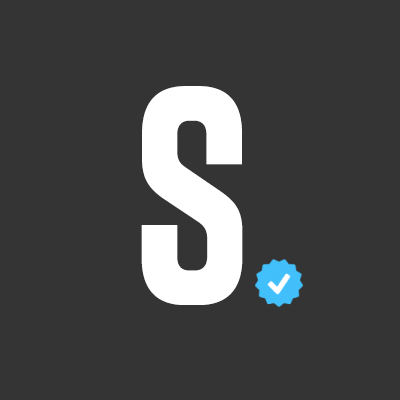
<style>
.page{position:relative;width:400px;height:400px;background:#343434}
.page>*{position:absolute;margin:0}
.t1{font:390px "Tungsten-Semibold";color:#ffffff;scale:0.92 1}
</style>
<div class="page">
<p class="t1" style="left:141px;top:86px;width:102px;height:219px">s</p>
</div>
